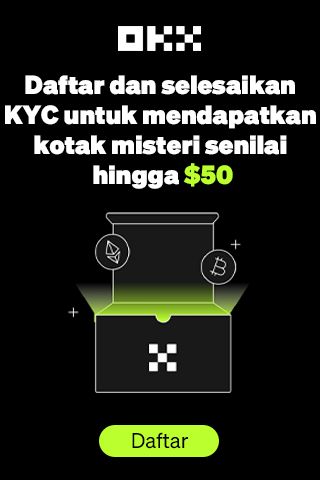
<style>
.page{position:relative;width:320px;height:480px;background:#000000}
.page>*{position:absolute;margin:0}
.t1{font:25.7px/30px "Sohne-Extrafett";color:#ffffff}
.t2{font:25.7px/30px "Sohne-Extrafett";color:#bcff2f}
.t3{font:20.9px "Sohne-Buch";color:#000000}
</style>
<div class="page">
<p class="t1" style="left:5px;top:75px;width:311px;height:114px;text-align:center">Daftar dan selesaikan <br>KYC untuk mendapatkan <br>kotak misteri senilai <br>hingga<span class="t2"> $50</span></p>
<p class="t3" style="left:132px;top:432px;width:56px;height:17px">Daftar</p>
</div>
